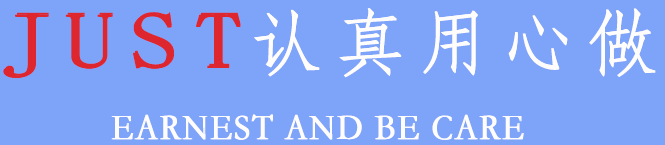
<style>
.page{position:relative;width:665px;height:145px;background:#7da4f8}
.page>*{position:absolute;margin:0}
.t1{font:79.2px "SimSun";letter-spacing:0.16em;color:#de262e;scale:1.23 1}
.t2{font:72.3px "STFangsong";letter-spacing:0.16em;color:#fffcfc}
.t3{font:36.6px "STFangsong";letter-spacing:0.06em;color:#fffcfc;scale:0.91 1}
</style>
<div class="page">
<p class="t1" style="left:3px;top:14px;width:236px;height:64px">JUST</p>
<p class="t1" style="left:4px;top:14px;width:236px;height:64px">JUST</p>
<p class="t1" style="left:5px;top:14px;width:236px;height:64px">JUST</p>
<p class="t1" style="left:5px;top:12px;width:236px;height:64px">JUST</p>
<p class="t2" style="left:254px;top:8px;width:401px;height:69px">认真用心做</p>
<p class="t2" style="left:255px;top:9px;width:401px;height:69px">认真用心做</p>
<p class="t2" style="left:255px;top:8px;width:401px;height:69px">认真用心做</p>
<p class="t3" style="left:111px;top:114px;width:412px;height:26px">EARNEST AND BE CARE</p>
<p class="t3" style="left:112px;top:114px;width:412px;height:26px">EARNEST AND BE CARE</p>
</div>
